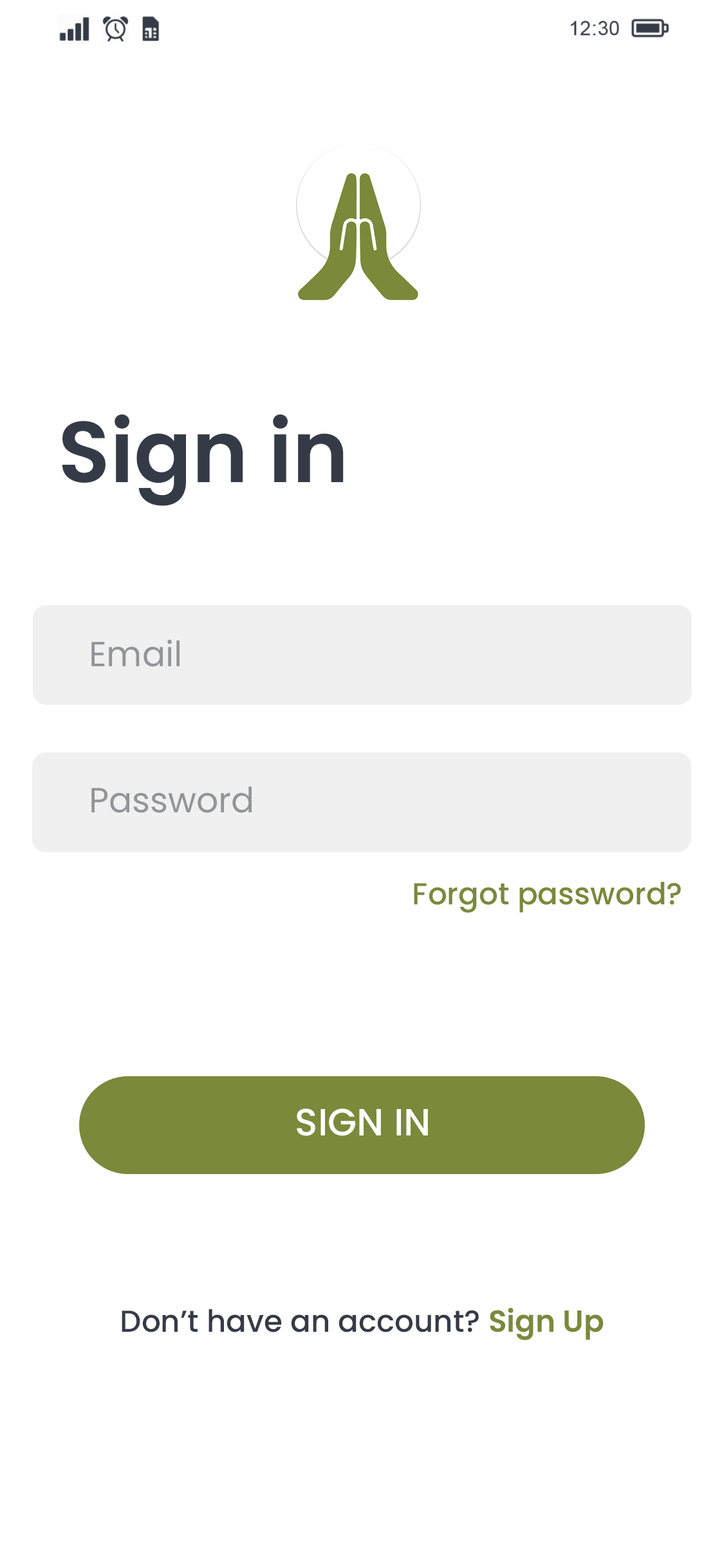
<style>
.page{position:relative;width:724px;height:1568px;background:#ffffff}
.page>*{position:absolute;margin:0}
.t1{font:86.3px "Poppins-SemiBold";color:#353b46}
.t2{font:34.9px "Poppins-Regular";color:#929498}
.t3{font:30.4px "Poppins-Medium";color:#7a893a}
.t4{font:38px "Poppins-Medium";color:#ffffff}
.t5{font:30.4px "Poppins-Medium";color:#353b46}
.t6{font:30.4px "Poppins-SemiBold";color:#7a893a}
</style>
<div class="page">
<p class="t1" style="left:62px;top:414px;width:282px;height:92px">Sign in</p>
<p class="t2" style="left:91px;top:639px;width:89px;height:28px">Email</p>
<p class="t2" style="left:91px;top:787px;width:161px;height:26px">Password</p>
<p class="t3" style="left:414px;top:882px;width:267px;height:31px">Forgot password?</p>
<p class="t4" style="left:297px;top:1108px;width:131px;height:28px">SIGN IN</p>
<p class="t5" style="left:122px;top:1308px;width:482px;height:32px">Don’t have an account? <span class="t6">Sign Up</span></p>
</div>
